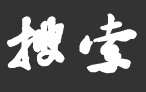
<style>
.page{position:relative;width:146px;height:92px;background:#333333}
.page>*{position:absolute;margin:0}
.t1{font:72px "ZIKUTANGSFXST";color:#ffffff;font-weight:bold}
</style>
<div class="page">
<p class="t1" style="left:7px;top:13px;width:130px;height:61px">搜索</p>
</div>
